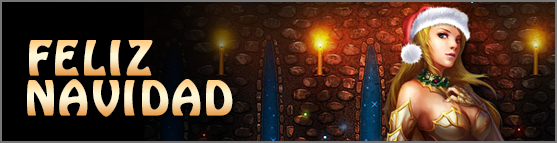
<style>
.page{position:relative;width:557px;height:143px}
.page>*{position:absolute;margin:0}
.t1{font:41.5px "HoboStd";letter-spacing:0.06em;font-weight:bold}
</style>
<div class="page">
<p class="t1" style="left:29px;top:40px;width:124px;height:36px">FELIZ</p>
<p class="t1" style="left:27px;top:79px;width:206px;height:38px">NAVIDAD</p>
</div>
